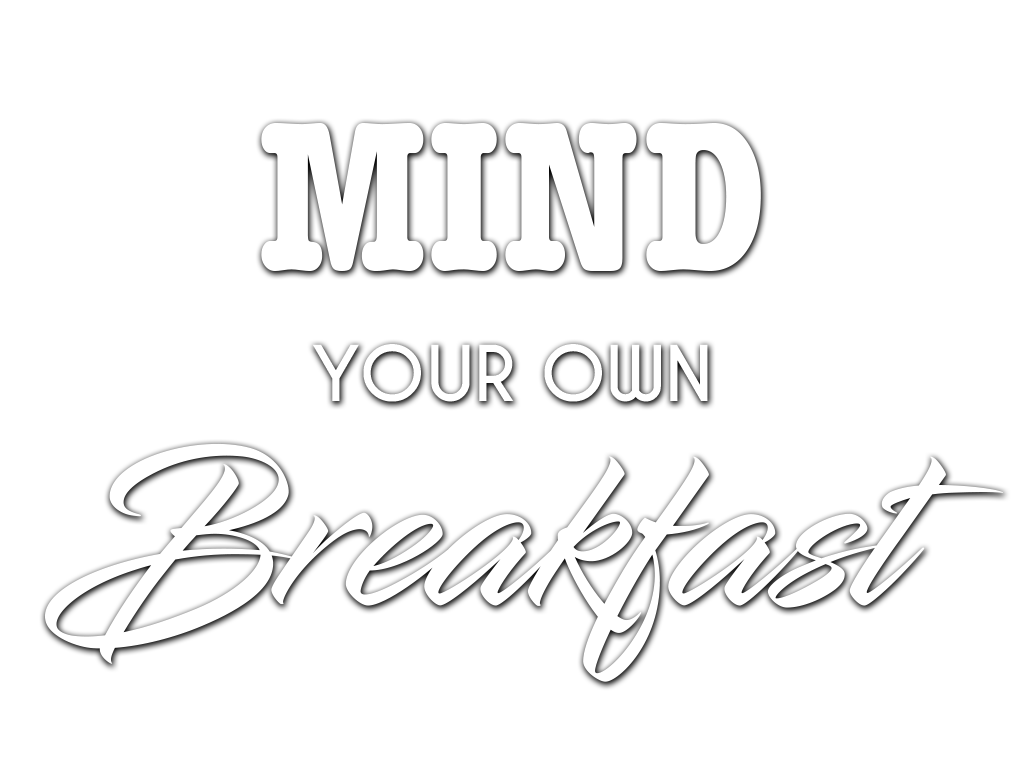
<style>
.page{position:relative;width:1024px;height:768px;background:#ffffff}
.page>*{position:absolute;margin:0}
.t1{font:220px "AmericanTypewriter-CondensedBold";color:#ffffff}
.t2{font:72px "CaviarDreams-Bold";color:#ffffff}
</style>
<div class="page">
<p class="t1" style="left:261px;top:123px;width:500px;height:148px">MIND</p>
<p class="t2" style="left:312px;top:344px;width:396px;height:58px">YOUR OWN</p>
</div>
